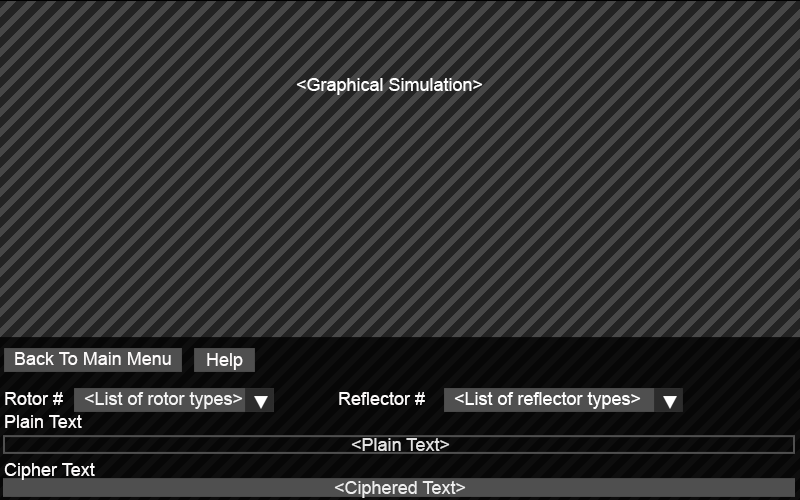
<style>
.page{position:relative;width:800px;height:500px;background:#232323}
.page>*{position:absolute;margin:0}
.t1{font:18px "ArialMT";color:#ffffff}
.t2{font:18px "ArialMT";color:#fdfbfb}
.t3{font:18px "ArialMT";color:#f5f5f5}
.t4{font:17.8px "ArialMT";color:#e2e2e2}
.t5{font:17.8px "ArialMT";color:#ededed}
</style>
<div class="page">
<p class="t1" style="left:296px;top:78px;width:187px;height:17px">&lt;Graphical Simulation&gt;</p>
<p class="t2" style="left:15px;top:352px;width:156px;height:13px">Back To Main Menu</p>
<p class="t2" style="left:207px;top:353px;width:36px;height:17px">Help</p>
<p class="t2" style="left:5px;top:392px;width:58px;height:13px">Rotor #</p>
<p class="t3" style="left:84px;top:392px;width:159px;height:17px">&lt;List of rotor types&gt;</p>
<p class="t2" style="left:339px;top:392px;width:86px;height:13px">Reflector #</p>
<p class="t1" style="left:454px;top:392px;width:187px;height:17px">&lt;List of reflector types&gt;</p>
<p class="t2" style="left:5px;top:415px;width:77px;height:13px">Plain Text</p>
<p class="t4" style="left:351px;top:438px;width:99px;height:13px">&lt;Plain Text&gt;</p>
<p class="t2" style="left:4px;top:463px;width:91px;height:17px">Cipher Text</p>
<p class="t5" style="left:334px;top:481px;width:132px;height:17px">&lt;Ciphered Text&gt;</p>
</div>
